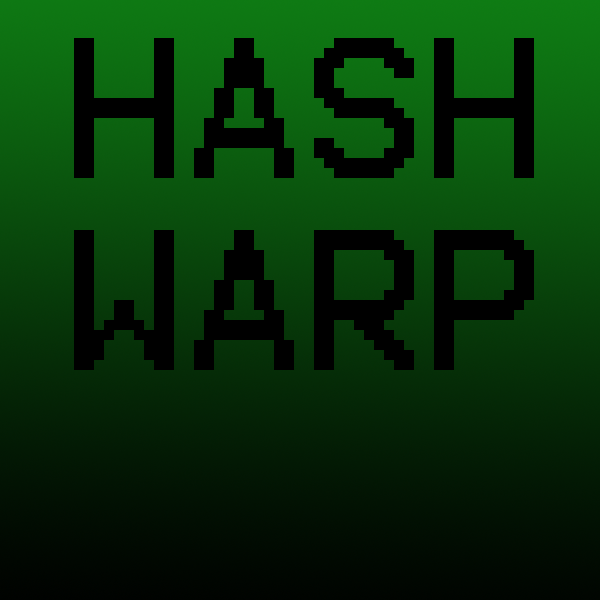
<style>
.page{position:relative;width:600px;height:600px}
.page>*{position:absolute;margin:0}
.t1{font:160px "Terminal";color:#000000}
</style>
<div class="page">
<p class="t1" style="left:74px;top:38px;width:460px;height:332px">HASH<br>WARP</p>
</div>
